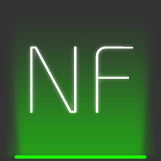
<style>
.page{position:relative;width:161px;height:161px}
.page>*{position:absolute;margin:0}
.t1{font:96px "Exo2-Thin";color:#ffffff}
</style>
<div class="page">
<p class="t1" style="left:30px;top:46px;width:104px;height:67px">NF</p>
</div>
